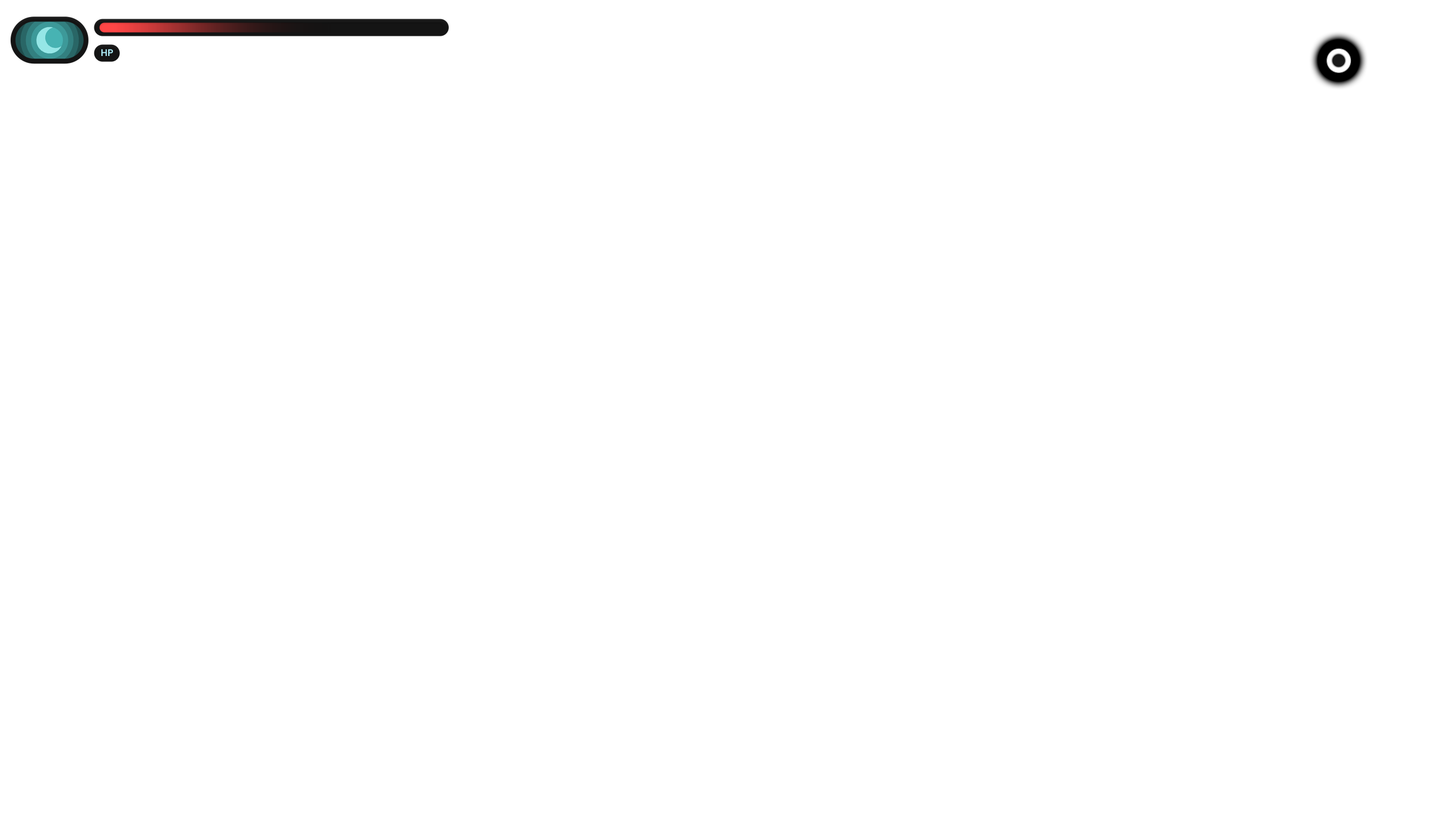
<style>
.page{position:relative;width:1456px;height:819px;background:#ffffff}
.page>*{position:absolute;margin:0}
.t1{font:9.6px "Poppins-Medium";color:#b2f2ff}
</style>
<div class="page">
<p class="t1" style="left:101px;top:49px;width:12px;height:7px">HP</p>
</div>
